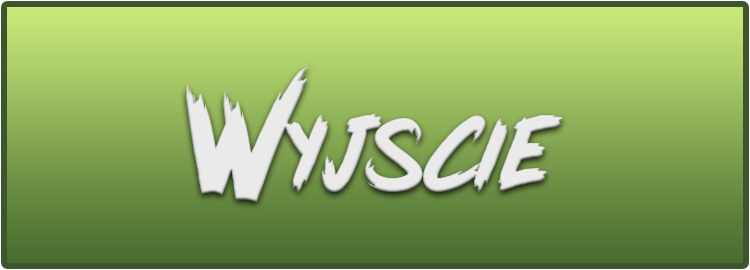
<style>
.page{position:relative;width:750px;height:270px}
.page>*{position:absolute;margin:0}
.t1{font:116.3px "PinkBlue";color:#eaeaea}
.t2{font:175.9px "PinkBlue";color:#eaeaea}
</style>
<div class="page">
<p class="t1" style="left:186px;top:66px;width:378px;height:136px"><span class="t2">W</span>yjscie</p>
</div>
